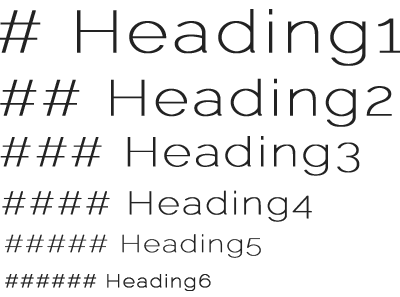
<style>
.page{position:relative;width:400px;height:297px;background:#ffffff}
.page>*{position:absolute;margin:0}
.t1{font:49.8px "Raleway-Thin";letter-spacing:0.05em;color:#222222;font-weight:bold;scale:1.2 1}
.t2{font:40.9px "Raleway-Thin";letter-spacing:0.05em;color:#222222;font-weight:bold;scale:1.2 1}
.t3{font:31.9px "Raleway-Thin";letter-spacing:0.05em;color:#222222;font-weight:bold;scale:1.2 1}
.t4{font:24.3px "Raleway-Thin";letter-spacing:0.05em;color:#222222;font-weight:bold;scale:1.2 1}
.t5{font:17.9px "Raleway-Thin";letter-spacing:0.05em;color:#222222;font-weight:bold;scale:1.2 1}
</style>
<div class="page">
<p class="t1" style="left:0px;top:78px;width:392px;height:49px">## Heading2</p>
<p class="t2" style="left:0px;top:136px;width:360px;height:40px">### Heading3</p>
<p class="t3" style="left:2px;top:190px;width:310px;height:32px">#### Heading4</p>
<p class="t4" style="left:5px;top:234px;width:256px;height:24px">##### Heading5</p>
<p class="t5" style="left:5px;top:274px;width:206px;height:17px">###### Heading6</p>
</div>
